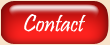
<style>
.page{position:relative;width:110px;height:45px}
.page>*{position:absolute;margin:0}
.t1{font:25px "Pristina-Regular";color:#ffffff}
</style>
<div class="page">
<p class="t1" style="left:24px;top:14px;width:62px;height:18px">Contact</p>
</div>
